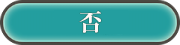
<style>
.page{position:relative;width:180px;height:45px;background:#239e9f}
.page>*{position:absolute;margin:0}
.t1{font:24px "RyuminPr6N-ExBold";color:#fff7f5}
</style>
<div class="page">
<p class="t1" style="left:79px;top:11px;width:22px;height:22px">否</p>
</div>
